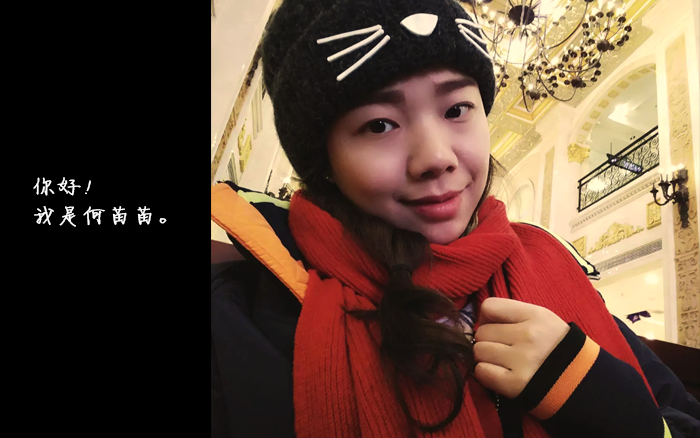
<style>
.page{position:relative;width:700px;height:438px;background:#000000}
.page>*{position:absolute;margin:0}
.t1{font:24px "FZJLJW--GB1-0";letter-spacing:0.02em;color:#ffffff;font-weight:bold}
</style>
<div class="page">
<p class="t1" style="left:33px;top:177px;width:134px;height:50px">你好！<br>我是何苗苗。</p>
</div>
